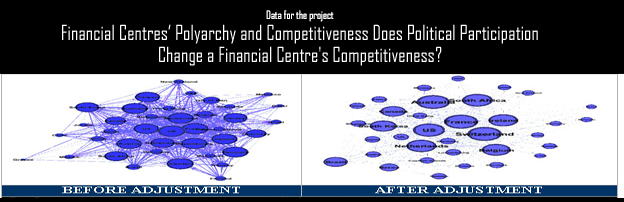
<style>
.page{position:relative;width:624px;height:202px;background:#000000}
.page>*{position:absolute;margin:0}
.t1{font:20px/7.1px "AgencyFB-Reg";letter-spacing:-0.005em;color:#ffffff}
.t2{font:11px/7.1px "AgencyFB-Reg";letter-spacing:-0.005em;color:#ffffff}
</style>
<div class="page">
<p class="t1" style="left:62px;top:10px;width:476px;height:56px;text-align:center"><span class="t2">Data for the project<br><br></span><br>Financial Centres’ Polyarchy and Competitiveness Does Political Participation <br><br><br>Change a Financial Centre's Competitiveness?</p>
</div>
